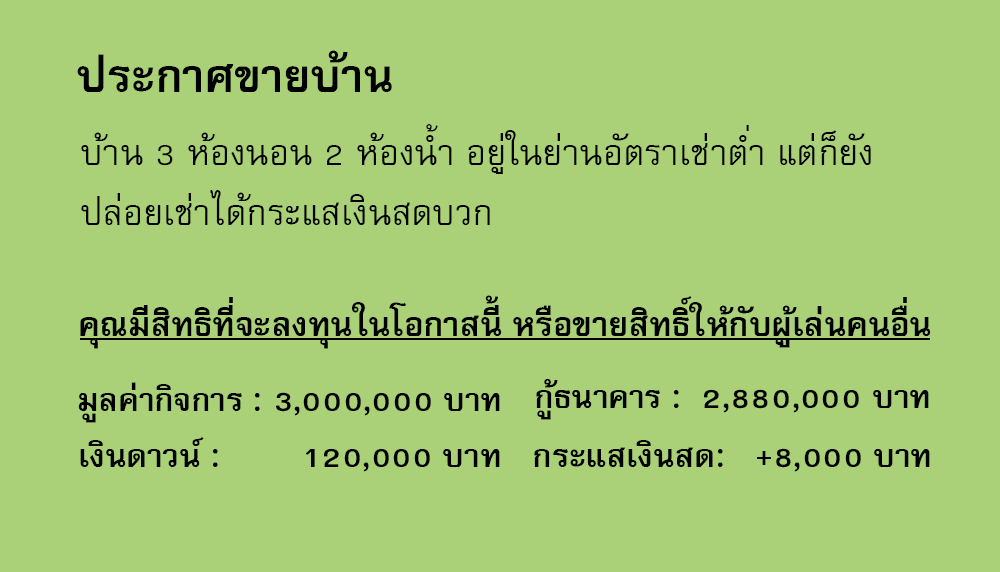
<style>
.page{position:relative;width:1000px;height:572px;background:#aad178}
.page>*{position:absolute;margin:0}
.t1{font:64px "FreesiaUPCBold";color:#000000}
.t2{font:50px/60px "FreesiaUPC";color:#000000}
.t3{font:47px "FreesiaUPCBold";color:#000000}
.t4{font:45px "FreesiaUPCBold";color:#000000}
</style>
<div class="page">
<p class="t1" style="left:77px;top:50px;width:315px;height:42px">ประกาศขายบ้าน</p>
<p class="t2" style="left:81px;top:124px;width:790px;height:101px">บ้าน 3 ห้องนอน 2 ห้องน้ำ อยู่ในย่านอัตราเช่าต่ำ แต่ก็ยัง<br>ปล่อยเช่าได้กระแสเงินสดบวก</p>
<p class="t3" style="left:80px;top:295px;width:851px;height:54px">คุณมีสิทธิที่จะลงทุนในโอกาสนี้ หรือขายสิทธิ์ให้กับผู้เล่นคนอื่น</p>
<p class="t4" style="left:78px;top:382px;width:422px;height:41px">มูลค่ากิจการ : 3,000,000 บาท</p>
<p class="t4" style="left:536px;top:379px;width:393px;height:41px">กู้ธนาคาร :  2,880,000 บาท</p>
<p class="t4" style="left:80px;top:436px;width:420px;height:36px">เงินดาวน์ :        120,000 บาท</p>
<p class="t4" style="left:534px;top:440px;width:396px;height:32px">กระแสเงินสด:   +8,000 บาท</p>
</div>
